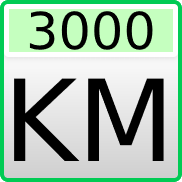
<style>
.page{position:relative;width:182px;height:182px}
.page>*{position:absolute;margin:0}
.t1{font:51px "DejaVuSans";color:#000000}
.t2{font:113px "DejaVuSans";color:#000000}
</style>
<div class="page">
<p class="t1" style="left:29px;top:11px;width:124px;height:39px">3000</p>
<p class="t2" style="left:14px;top:78px;width:150px;height:83px">KM</p>
</div>
